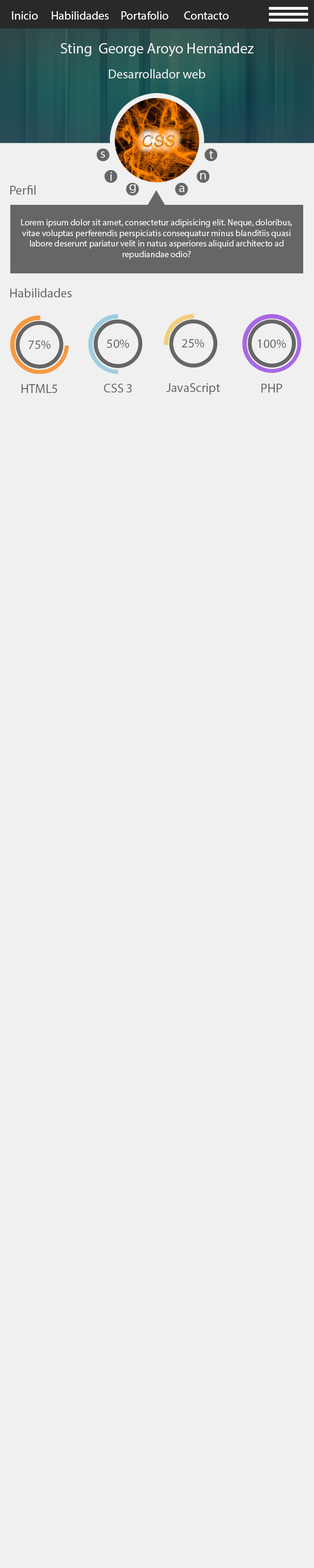
<style>
.page{position:relative;width:314px;height:1568px;background:#f0f0f0}
.page>*{position:absolute;margin:0}
.t1{font:11.8px "MyriadPro-Regular";color:#ffffff}
.t2{font:14.7px "MyriadPro-Regular";color:#f0f0f0}
.t3{font:12.7px "MyriadPro-Regular";color:#f0f0f0}
.t4{font:13.1px "MyriadPro-Regular";color:#f0f0f0;scale:1.04 1}
.t5{font:12.7px "MyriadPro-Regular";color:#666666}
.t6{font:8.8px "MyriadPro-Regular";color:#f0f0f0}
</style>
<div class="page">
<p class="t1" style="left:12px;top:11px;width:26px;height:9px">Inicio</p>
<p class="t1" style="left:51px;top:11px;width:58px;height:9px">Habilidades</p>
<p class="t1" style="left:121px;top:11px;width:47px;height:9px">Portafolio</p>
<p class="t1" style="left:184px;top:11px;width:44px;height:9px">Contacto</p>
<p class="t2" style="left:60px;top:43px;width:193px;height:14px">Sting  George Aroyo Hernández</p>
<p class="t3" style="left:109px;top:69px;width:96px;height:9px">Desarrollador web</p>
<p class="t4" style="left:100px;top:151px;width:5px;height:7px">s</p>
<p class="t4" style="left:209px;top:150px;width:4px;height:9px">t</p>
<p class="t4" style="left:110px;top:172px;width:2px;height:9px">i</p>
<p class="t4" style="left:200px;top:173px;width:6px;height:6px">n</p>
<p class="t5" style="left:10px;top:185px;width:26px;height:10px">Perfil</p>
<p class="t4" style="left:129px;top:184px;width:7px;height:9px">g</p>
<p class="t4" style="left:179px;top:186px;width:5px;height:6px">a</p>
<p class="t6" style="left:21px;top:219px;width:271px;height:40px;text-align:center">Lorem ipsum dolor sit amet, consectetur adipisicing elit. Neque, doloribus,<br>vitae voluptas perferendis perspiciatis consequatur minus blanditiis quasi<br>labore deserunt pariatur velit in natus asperiores aliquid architecto ad<br>repudiandae odio?</p>
<p class="t5" style="left:10px;top:288px;width:62px;height:9px">Habilidades</p>
<p class="t5" style="left:28px;top:341px;width:22px;height:8px">75%</p>
<p class="t5" style="left:106px;top:340px;width:23px;height:8px">50%</p>
<p class="t5" style="left:182px;top:339px;width:22px;height:8px">25%</p>
<p class="t5" style="left:257px;top:340px;width:29px;height:8px">100%</p>
<p class="t5" style="left:22px;top:384px;width:35px;height:9px">HTML5</p>
<p class="t5" style="left:104px;top:384px;width:28px;height:8px">CSS 3</p>
<p class="t5" style="left:166px;top:383px;width:54px;height:11px">JavaScript</p>
<p class="t5" style="left:261px;top:384px;width:21px;height:8px">PHP</p>
</div>
